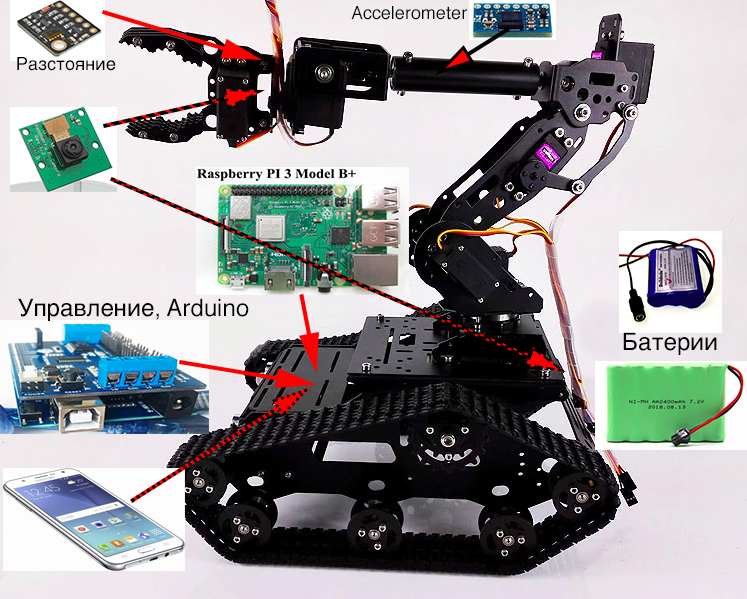
<style>
.page{position:relative;width:747px;height:599px}
.page>*{position:absolute;margin:0}
.t1{font:18px "Helvetica";color:#000000}
.t2{font:24px "Helvetica";color:#000000}
</style>
<div class="page">
<p class="t1" style="left:351px;top:6px;width:116px;height:14px">Accelerometer</p>
<p class="t1" style="left:17px;top:57px;width:99px;height:14px">Разстояние</p>
<p class="t2" style="left:18px;top:298px;width:231px;height:23px">Управление, Arduino</p>
<p class="t2" style="left:623px;top:332px;width:94px;height:23px">Батерии</p>
</div>
